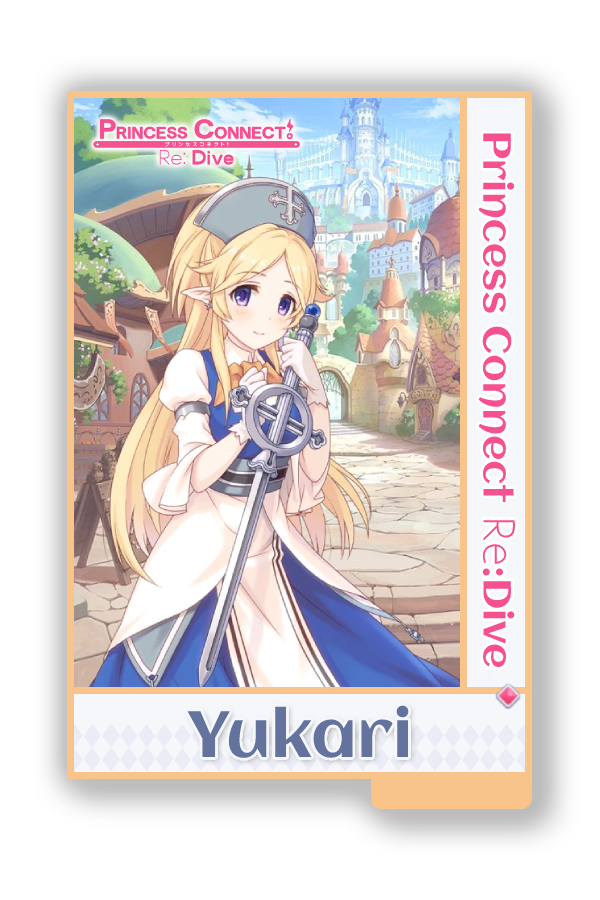
<style>
.page{position:relative;width:600px;height:900px;background:#ffffff}
.page>*{position:absolute;margin:0}
.t1{font:39px "Aclonica-Regular";color:#f55191}
.t2{font:39px "AaarghNormal";color:#f55191}
.t3{font:65px "Aclonica-Regular";color:#64739d}
</style>
<div class="page">
<p class="t1" style="left:478px;top:133px;width:38px;height:534px;rotate:90deg">Princess Connect <span class="t2">Re</span>:Dive</p>
<p class="t3" style="left:187px;top:705px;width:222px;height:53px">Yukari</p>
</div>
